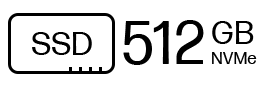
<style>
.page{position:relative;width:262px;height:86px;background:#ffffff}
.page>*{position:absolute;margin:0}
.t1{font:60px "FormaDJRMicro-Regular";color:#000000}
.t2{font:32px "FormaDJRMicro-Regular";color:#000000}
.t3{font:17px "FormaDJRMicro-Regular";color:#000000}
</style>
<div class="page">
<p class="t1" style="left:123px;top:20px;width:81px;height:45px">512</p>
<p class="t2" style="left:212px;top:21px;width:42px;height:23px">GB</p>
<p class="t2" style="left:32px;top:32px;width:60px;height:23px">SSD</p>
<p class="t3" style="left:212px;top:52px;width:45px;height:12px">NVMe</p>
</div>
